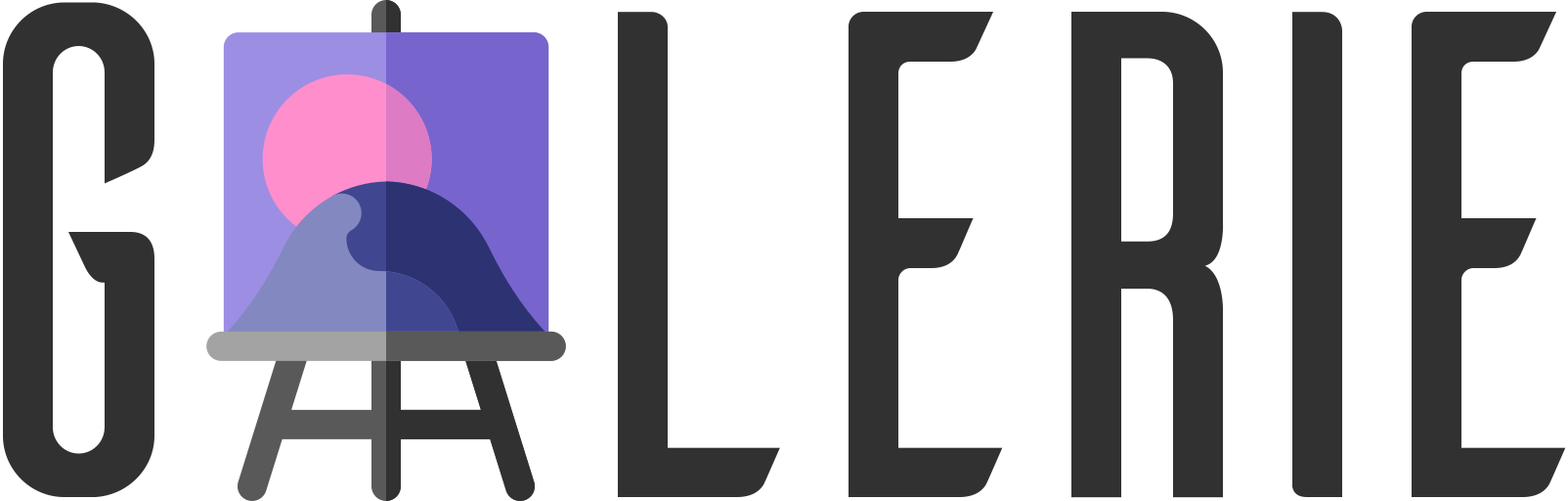
<style>
.page{position:relative;width:1568px;height:501px;background:#ffffff}
.page>*{position:absolute;margin:0}
.t1{font:692.4px "Ailerons-Regular";color:#313131}
</style>
<div class="page">
<p class="t1" style="left:3px;top:2px;width:151px;height:495px">g</p>
<p class="t1" style="left:618px;top:12px;width:162px;height:485px">l</p>
<p class="t1" style="left:849px;top:12px;width:154px;height:485px">e</p>
<p class="t1" style="left:1071px;top:12px;width:153px;height:486px">r</p>
<p class="t1" style="left:1292px;top:12px;width:50px;height:485px">i</p>
<p class="t1" style="left:1412px;top:12px;width:154px;height:485px">e</p>
</div>
